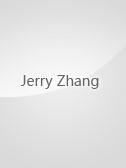
<style>
.page{position:relative;width:126px;height:168px}
.page>*{position:absolute;margin:0}
.t1{font:14px "MicrosoftYaHei";color:#666666}
</style>
<div class="page">
<p class="t1" style="left:21px;top:75px;width:78px;height:14px">Jerry Zhang</p>
</div>
